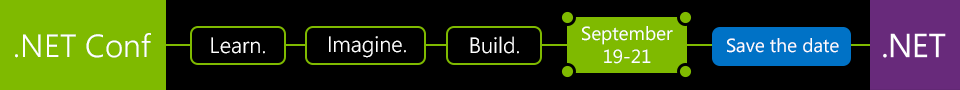
<style>
.page{position:relative;width:960px;height:90px;background:#000000}
.page>*{position:absolute;margin:0}
.t1{font:19px/23px "SegoeUI";color:#ffffff}
.t2{font:32px "SegoeUI-Semilight";color:#ffffff}
.t3{font:22px "SegoeUI-Semilight";color:#ffffff}
.t4{font:19px "SegoeUI";color:#ffffff}
</style>
<div class="page">
<p class="t1" style="left:582px;top:26px;width:91px;height:38px;text-align:center">September<br>19-21</p>
<p class="t2" style="left:15px;top:33px;width:136px;height:25px">.NET Conf</p>
<p class="t3" style="left:211px;top:37px;width:54px;height:17px">Learn.</p>
<p class="t3" style="left:329px;top:36px;width:77px;height:22px">Imagine.</p>
<p class="t3" style="left:470px;top:36px;width:49px;height:18px">Build.</p>
<p class="t4" style="left:727px;top:38px;width:112px;height:15px">Save the date</p>
</div>
